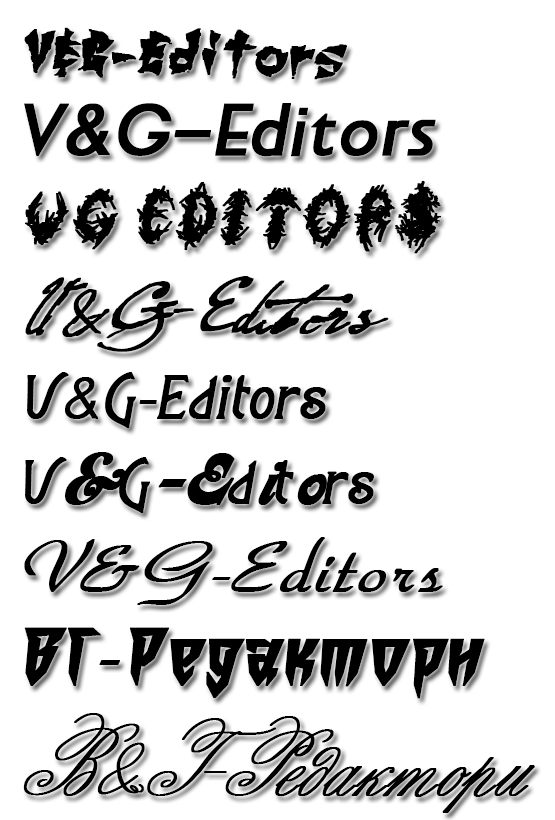
<style>
.page{position:relative;width:555px;height:820px;background:#ffffff}
.page>*{position:absolute;margin:0}
.t1{font:72px "ChangChang";color:#000000;font-weight:bold;font-style:italic}
.t2{font:72px "Awake-Regular";color:#000000;font-weight:bold;font-style:italic}
.t3{font:72px "FlorAlphabet-Bold";color:#000000;font-weight:bold;font-style:italic}
.t4{font:72px "Fountain-Pen-Frenzy";color:#000000;font-weight:bold;font-style:italic}
.t5{font:72px "Agatha-Modern";color:#000000;font-weight:bold;font-style:italic}
.t6{font:72px "Asessor";color:#000000;font-weight:bold;font-style:italic}
.t7{font:72px "TorhokItalic";color:#000000;font-weight:bold;font-style:italic}
.t8{font:72px "Ordens_VK-Normal";color:#000000;font-weight:bold;font-style:italic}
.t9{font:72px "MinionPro-Regular";color:#000000;font-weight:bold;font-style:italic}
.t10{font:72px "ScriptThinPen";color:#000000;font-weight:bold;font-style:italic}
</style>
<div class="page">
<p class="t1" style="left:24px;top:27px;width:323px;height:53px">V&amp;G-Editors</p>
<p class="t2" style="left:24px;top:103px;width:412px;height:54px">V&amp;G-Editors</p>
<p class="t3" style="left:24px;top:180px;width:418px;height:74px">V&amp;G Editors</p>
<p class="t4" style="left:25px;top:276px;width:364px;height:76px">V&amp;G-Editors</p>
<p class="t5" style="left:27px;top:372px;width:299px;height:56px">V&amp;G-Editors</p>
<p class="t6" style="left:25px;top:452px;width:349px;height:61px"><span class="t5">V</span>&amp;<span class="t5">G</span>-E<span class="t5">d</span>i<span class="t5">t</span>o<span class="t5">rs</span></p>
<p class="t7" style="left:24px;top:537px;width:419px;height:68px">V&amp;G-Editors</p>
<p class="t8" style="left:24px;top:627px;width:461px;height:72px">ВГ<span class="t9">-</span>Редактори</p>
<p class="t10" style="left:23px;top:713px;width:512px;height:100px">В&amp;Г-Редактори</p>
</div>
